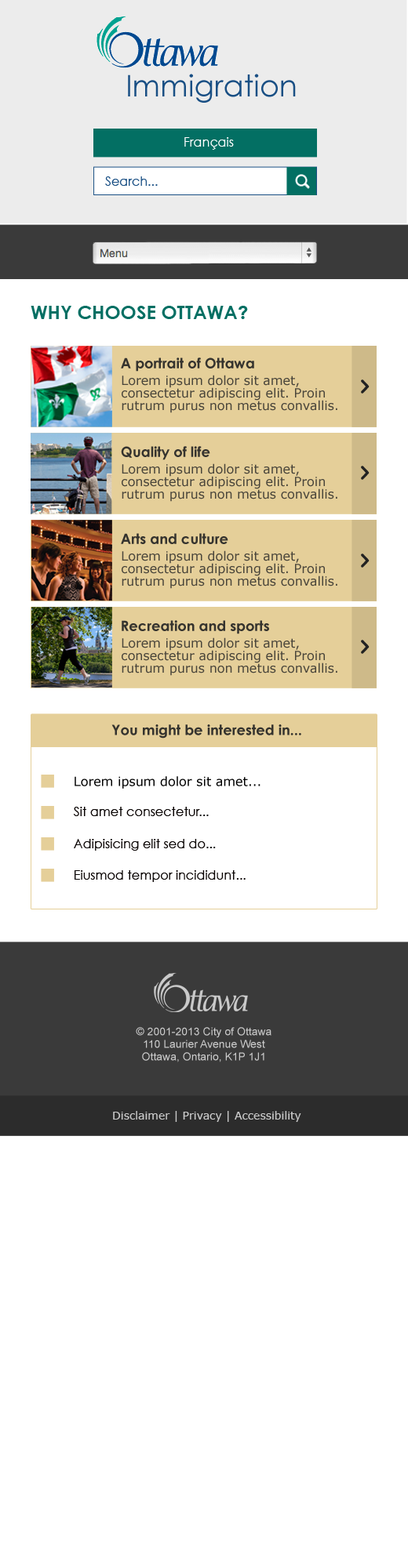
<style>
.page{position:relative;width:408px;height:1568px;background:#ffffff}
.page>*{position:absolute;margin:0}
.t1{font:29.8px "CenturyGothic";color:#194f84}
.t2{font:12.5px "CenturyGothic";color:#ffffff}
.t3{font:12.5px "CenturyGothic";color:#194f84}
.t4{font:18.8px "CenturyGothic-Bold";color:#036f63}
.t5{font:14.1px "CenturyGothic-Bold";color:#222222}
.t6{font:12.5px/12.5px "Verdana";color:#49453a}
.t7{font:12.5px "Verdana";color:#000000}
.t8{font:12.5px "CenturyGothic";color:#070100}
.t9{font:12.5px "CenturyGothic";color:#000000}
.t10{font:11px/12.5px "ArialMT";color:#cacaca}
.t11{font:11px "Verdana";color:#cacaca}
</style>
<div class="page">
<p class="t1" style="left:128px;top:74px;width:168px;height:29px">Immigration</p>
<p class="t2" style="left:184px;top:137px;width:50px;height:13px">Français</p>
<p class="t3" style="left:105px;top:176px;width:53px;height:10px">Search...</p>
<p class="t4" style="left:31px;top:306px;width:217px;height:13px">WHY CHOOSE OTTAWA?</p>
<p class="t5" style="left:121px;top:358px;width:133px;height:14px;opacity:0.9">A portrait of Ottawa</p>
<p class="t6" style="left:122px;top:375px;width:215px;height:38px">Lorem ipsum dolor sit amet, consectetur adipiscing elit. Proin rutrum purus non metus convallis.</p>
<p class="t5" style="left:121px;top:446px;width:89px;height:14px;opacity:0.9">Quality of life</p>
<p class="t6" style="left:122px;top:463px;width:215px;height:39px">Lorem ipsum dolor sit amet, consectetur adipiscing elit. Proin rutrum purus non metus convallis.</p>
<p class="t5" style="left:121px;top:533px;width:107px;height:11px;opacity:0.9">Arts and culture</p>
<p class="t6" style="left:122px;top:550px;width:215px;height:39px">Lorem ipsum dolor sit amet, consectetur adipiscing elit. Proin rutrum purus non metus convallis.</p>
<p class="t5" style="left:122px;top:620px;width:147px;height:14px;opacity:0.9">Recreation and sports</p>
<p class="t6" style="left:122px;top:637px;width:215px;height:39px">Lorem ipsum dolor sit amet, consectetur adipiscing elit. Proin rutrum purus non metus convallis.</p>
<p class="t5" style="left:111px;top:724px;width:190px;height:15px;opacity:0.9">You might be interested in...</p>
<p class="t7" style="left:74px;top:776px;width:186px;height:13px">Lorem ipsum dolor sit amet...</p>
<p class="t8" style="left:73px;top:807px;width:136px;height:9px">Sit amet consectetur<span class="t9">...</span></p>
<p class="t8" style="left:74px;top:839px;width:142px;height:12px">Adipisicing elit sed do<span class="t9">...</span></p>
<p class="t8" style="left:74px;top:870px;width:171px;height:12px">Eiusmod tempor incididunt...</p>
<p class="t10" style="left:136px;top:1027px;width:135px;height:35px;text-align:center">© 2001-2013 City of Ottawa<br>110 Laurier Avenue West <br>Ottawa, Ontario, K1P 1J1</p>
<p class="t11" style="left:113px;top:1111px;width:188px;height:11px">Disclaimer | Privacy | Accessibility</p>
</div>
